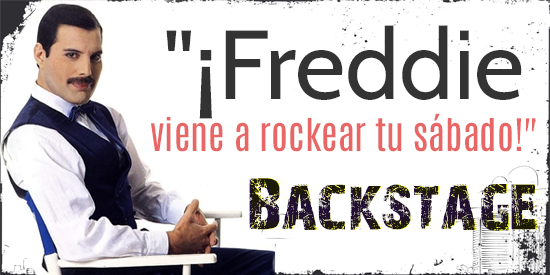
<style>
.page{position:relative;width:550px;height:275px;background:#ffffff}
.page>*{position:absolute;margin:0}
.t1{font:38px/52px "Antonio-Regular";color:#e86665}
.t2{font:98px "Cabin-Regular";color:#333333}
.t3{font:67px "28-Days-Later-Regular"}
</style>
<div class="page">
<p class="t1" style="left:151px;top:25px;width:385px;height:127px;text-align:center"><span class="t2">"¡Freddie<br></span>viene a rockear tu sábado!"</p>
<p class="t3" style="left:249px;top:178px;width:286px;height:53px">Backstage</p>
<p class="t3" style="left:251px;top:178px;width:286px;height:53px">Backstage</p>
</div>
